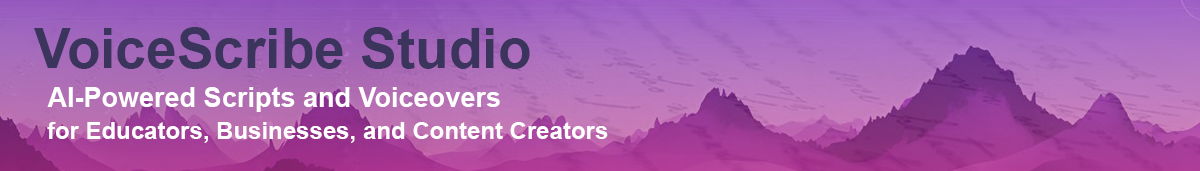
<style>
.page{position:relative;width:1200px;height:171px}
.page>*{position:absolute;margin:0}
.t1{font:55px "Arial-BoldMT";color:#3b355d}
.t2{font:27.1px "Arial-BoldMT";color:#ffffff}
.t3{font:24px "Arial-BoldMT";color:#fefeff}
</style>
<div class="page">
<p class="t1" style="left:34px;top:27px;width:496px;height:42px">VoiceScribe Studio</p>
<p class="t2" style="left:47px;top:87px;width:453px;height:25px">AI-Powered Scripts and Voiceovers</p>
<p class="t3" style="left:47px;top:122px;width:561px;height:21px">for Educators, Businesses, and Content Creators</p>
</div>
